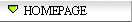
<style>
.page{position:relative;width:132px;height:22px;background:#ffffff}
.page>*{position:absolute;margin:0}
.t1{font:12px "TimesNewRomanPSMT";letter-spacing:-0.05em;color:#000000}
</style>
<div class="page">
<p class="t1" style="left:24px;top:6px;width:63px;height:9px">HOMEPAGE</p>
</div>
